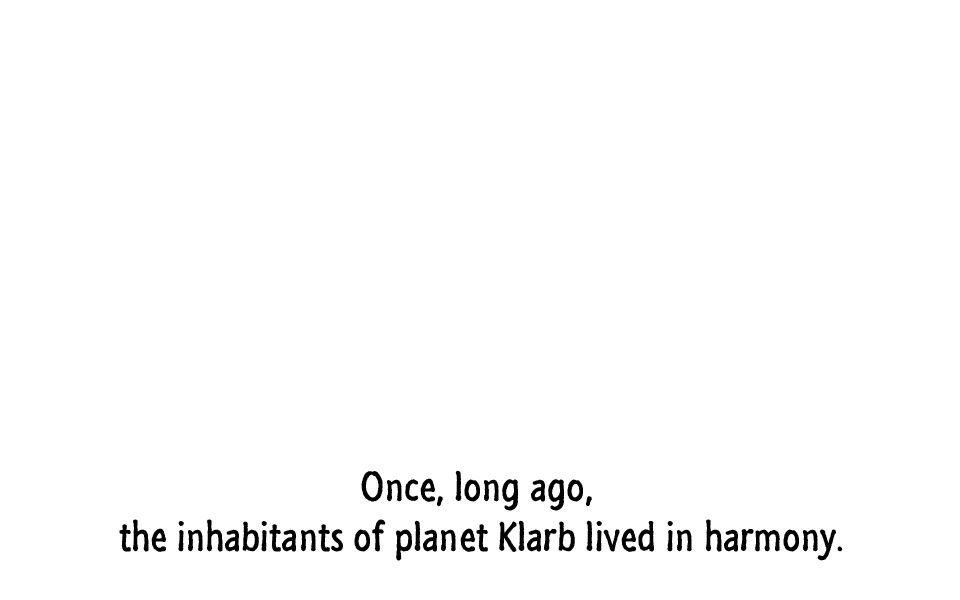
<style>
.page{position:relative;width:960px;height:600px;background:#ffffff}
.page>*{position:absolute;margin:0}
.t1{font:42px "SegoeMarker";color:#000000}
</style>
<div class="page">
<p class="t1" style="left:119px;top:470px;width:724px;height:91px;text-align:center">Once, long ago, <br>the inhabitants of planet Klarb lived in harmony.</p>
</div>
